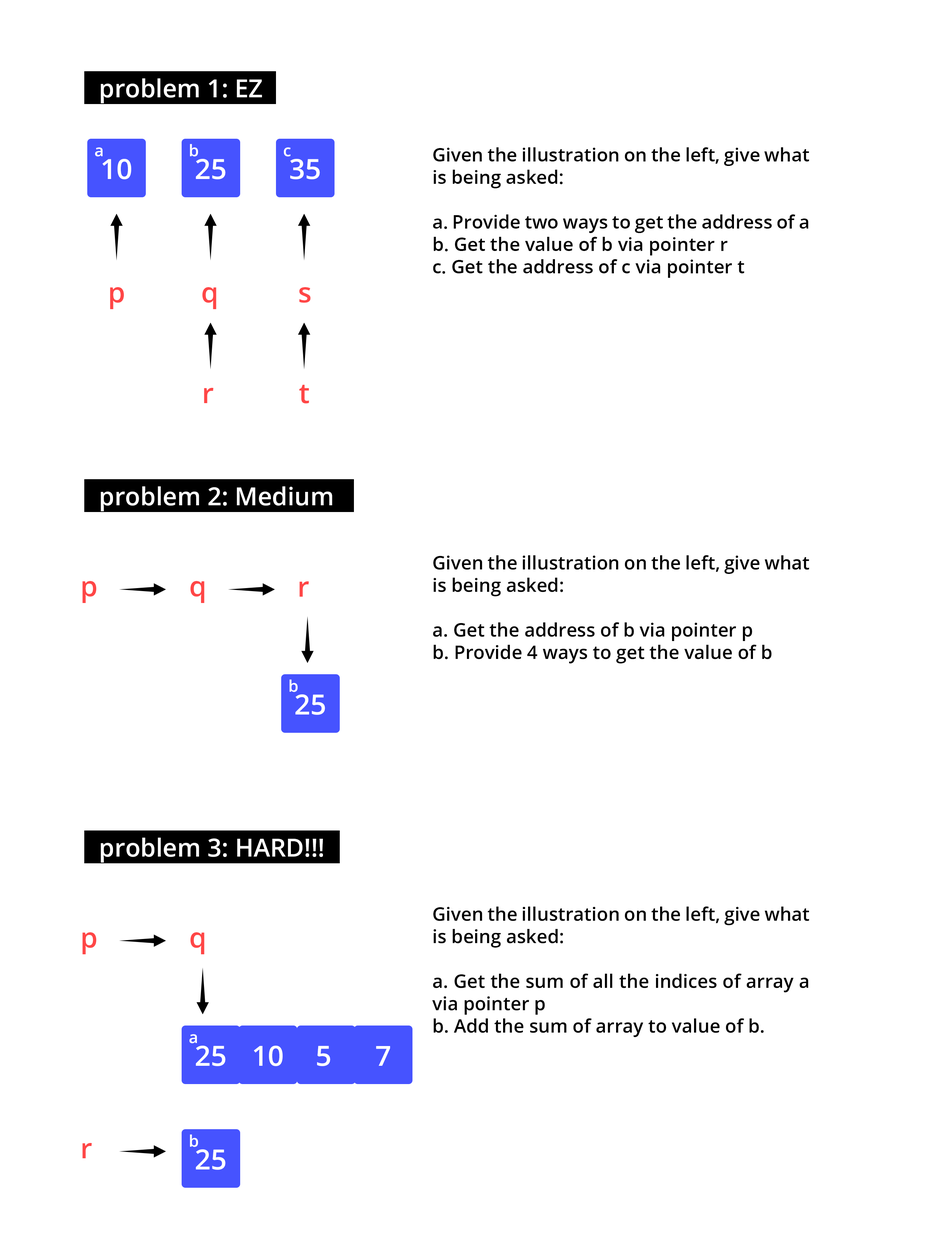
<style>
.page{position:relative;width:951px;height:1253px;background:#ffffff}
.page>*{position:absolute;margin:0}
.t1{font:24.9px "OpenSans-SemiBold";color:#ffffff}
.t2{font:16px "OpenSans-SemiBold";color:#ffffff}
.t3{font:18.7px "OpenSans-SemiBold";color:#000000}
.t4{font:27.8px "OpenSans-SemiBold";color:#ffffff}
.t5{font:27.8px "OpenSans-SemiBold";color:#ff4646}
</style>
<div class="page">
<p class="t1" style="left:101px;top:78px;width:161px;height:25px">problem 1: EZ</p>
<p class="t2" style="left:95px;top:147px;width:8px;height:10px">a</p>
<p class="t2" style="left:190px;top:144px;width:8px;height:13px">b</p>
<p class="t2" style="left:284px;top:147px;width:7px;height:10px">c</p>
<p class="t3" style="left:433px;top:147px;width:377px;height:131px;text-align:justify">Given the illustration on the left, give what is being asked:<br><br>a. Provide two ways to get the address of a<br>b. Get the value of b via pointer r<br>c. Get the address of c via pointer t</p>
<p class="t4" style="left:102px;top:159px;width:29px;height:20px">10</p>
<p class="t4" style="left:196px;top:159px;width:30px;height:20px">25</p>
<p class="t4" style="left:290px;top:159px;width:30px;height:20px">35</p>
<p class="t5" style="left:110px;top:287px;width:14px;height:22px">p</p>
<p class="t5" style="left:202px;top:287px;width:14px;height:22px">q</p>
<p class="t5" style="left:299px;top:287px;width:12px;height:16px">s</p>
<p class="t5" style="left:204px;top:388px;width:10px;height:15px">r</p>
<p class="t5" style="left:299px;top:385px;width:10px;height:19px">t</p>
<p class="t1" style="left:101px;top:486px;width:231px;height:25px">problem 2: Medium</p>
<p class="t3" style="left:433px;top:555px;width:377px;height:109px;text-align:justify">Given the illustration on the left, give what is being asked:<br><br>a. Get the address of b via pointer p<br>b. Provide 4 ways to get the value of b</p>
<p class="t5" style="left:82px;top:581px;width:15px;height:22px">p</p>
<p class="t5" style="left:190px;top:581px;width:14px;height:22px">q</p>
<p class="t5" style="left:300px;top:582px;width:9px;height:15px">r</p>
<p class="t2" style="left:289px;top:680px;width:9px;height:12px">b</p>
<p class="t4" style="left:295px;top:695px;width:30px;height:20px">25</p>
<p class="t1" style="left:101px;top:838px;width:222px;height:25px">problem 3: HARD!!!</p>
<p class="t3" style="left:432px;top:907px;width:378px;height:130px;text-align:justify">Given the illustration on the left, give what is being asked:<br><br>a. Get the sum of all the indices of array a via pointer p<br>b. Add the sum of array to value of b.</p>
<p class="t5" style="left:82px;top:933px;width:15px;height:22px">p</p>
<p class="t5" style="left:190px;top:933px;width:14px;height:22px">q</p>
<p class="t2" style="left:190px;top:1034px;width:7px;height:10px">a</p>
<p class="t4" style="left:196px;top:1046px;width:30px;height:21px">25</p>
<p class="t4" style="left:254px;top:1046px;width:29px;height:21px">10</p>
<p class="t4" style="left:317px;top:1046px;width:14px;height:21px">5</p>
<p class="t4" style="left:376px;top:1046px;width:14px;height:20px">7</p>
<p class="t5" style="left:82px;top:1143px;width:10px;height:16px">r</p>
<p class="t2" style="left:190px;top:1135px;width:8px;height:13px">b</p>
<p class="t4" style="left:196px;top:1150px;width:30px;height:20px">25</p>
</div>
